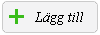
<style>
.page{position:relative;width:100px;height:35px;background:#f3f3f4}
.page>*{position:absolute;margin:0}
.t1{font:48px "Tunga";color:#3abc1b}
.t2{font:14px "TimesNewRomanPS-ItalicMT";color:#000000}
</style>
<div class="page">
<p class="t1" style="left:9px;top:9px;width:15px;height:15px">+</p>
<p class="t2" style="left:35px;top:12px;width:48px;height:13px">Lägg till</p>
</div>
